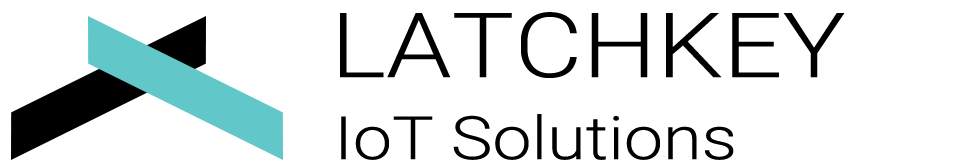
<style>
.page{position:relative;width:957px;height:167px;background:#ffffff}
.page>*{position:absolute;margin:0}
.t1{font:90px "Roboto-Light";color:#000000;scale:1.17 1}
.t2{font:60px "Roboto-Light";color:#000000;scale:1.17 1}
</style>
<div class="page">
<p class="t1" style="left:340px;top:12px;width:505px;height:66px">LATCHKEY</p>
<p class="t2" style="left:341px;top:114px;width:393px;height:46px">IoT Solutions</p>
</div>
